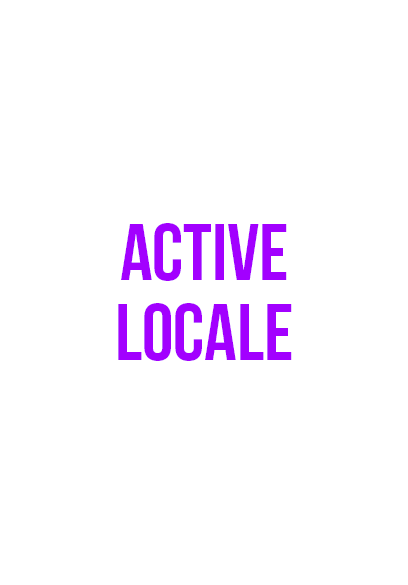
<style>
.page{position:relative;width:408px;height:585px;background:#ffffff}
.page>*{position:absolute;margin:0}
.t1{font:80px/80px "BebasNeue";color:#a200ff}
</style>
<div class="page">
<p class="t1" style="left:118px;top:223px;width:174px;height:138px;text-align:center">active<br>locale</p>
</div>
